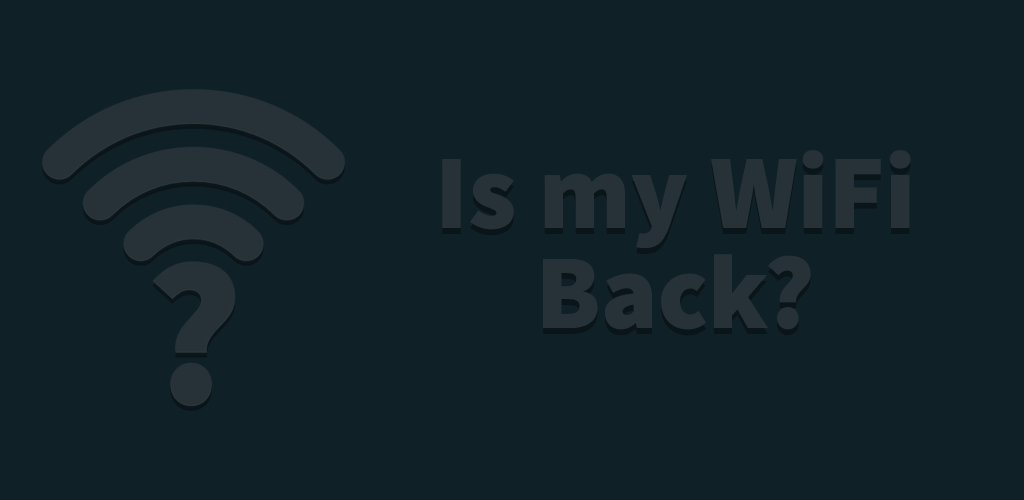
<style>
.page{position:relative;width:1024px;height:500px;background:#102027}
.page>*{position:absolute;margin:0}
.t1{font:106px/100px "SourceSansPro-Black";color:#263238}
</style>
<div class="page">
<p class="t1" style="left:442px;top:150px;width:469px;height:180px;text-align:center">Is my WiFi <br>Back?</p>
</div>
